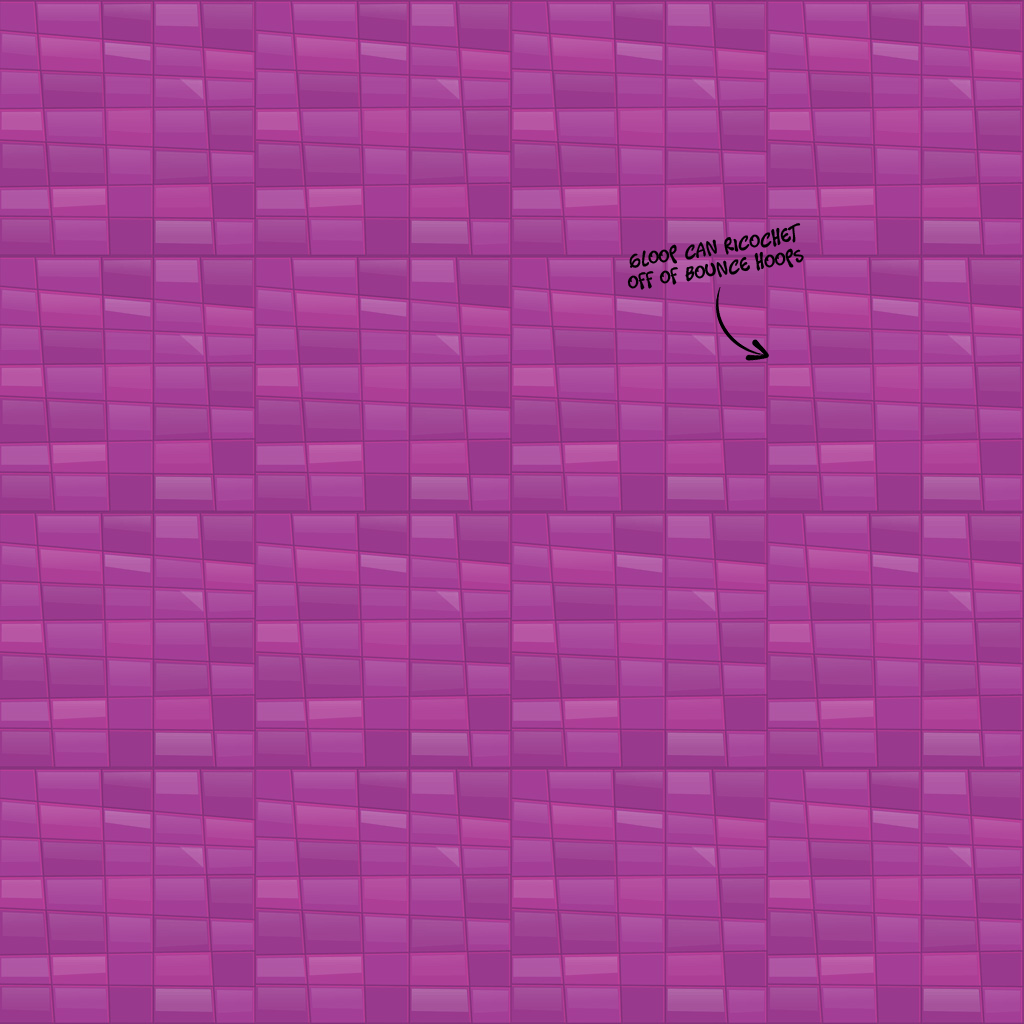
<style>
.page{position:relative;width:1024px;height:1024px}
.page>*{position:absolute;margin:0}
.t1{font:18px "Timotheos";letter-spacing:0.025em;color:#000000}
</style>
<div class="page">
<p class="t1" style="left:627px;top:223px;width:177px;height:67px;text-align:center;rotate:-9deg">gloop can ricochet<br>off of bounce hoops</p>
</div>
